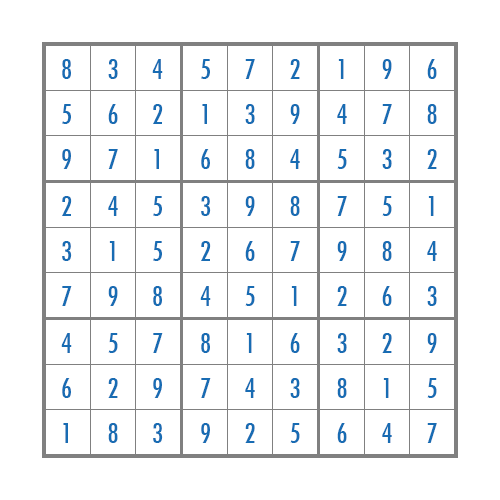
<style>
.page{position:relative;width:500px;height:500px;background:#ffffff}
.page>*{position:absolute;margin:0}
.t1{font:27px "Futura-CondensedMedium";color:#186cb3}
</style>
<div class="page">
<p class="t1" style="left:62px;top:59px;width:9px;height:20px">8</p>
<p class="t1" style="left:108px;top:59px;width:10px;height:20px">3</p>
<p class="t1" style="left:152px;top:59px;width:11px;height:20px">4</p>
<p class="t1" style="left:201px;top:59px;width:9px;height:20px">5</p>
<p class="t1" style="left:245px;top:59px;width:10px;height:20px">7</p>
<p class="t1" style="left:290px;top:59px;width:10px;height:20px">2</p>
<p class="t1" style="left:338px;top:59px;width:6px;height:20px">1</p>
<p class="t1" style="left:382px;top:59px;width:10px;height:20px">9</p>
<p class="t1" style="left:427px;top:59px;width:10px;height:20px">6</p>
<p class="t1" style="left:62px;top:104px;width:9px;height:20px">5</p>
<p class="t1" style="left:108px;top:104px;width:10px;height:20px">6</p>
<p class="t1" style="left:153px;top:104px;width:10px;height:20px">2</p>
<p class="t1" style="left:202px;top:104px;width:5px;height:20px">1</p>
<p class="t1" style="left:245px;top:104px;width:10px;height:20px">3</p>
<p class="t1" style="left:290px;top:104px;width:10px;height:20px">9</p>
<p class="t1" style="left:337px;top:104px;width:10px;height:20px">4</p>
<p class="t1" style="left:382px;top:104px;width:10px;height:20px">7</p>
<p class="t1" style="left:427px;top:104px;width:10px;height:20px">8</p>
<p class="t1" style="left:62px;top:149px;width:9px;height:20px">9</p>
<p class="t1" style="left:108px;top:149px;width:10px;height:20px">7</p>
<p class="t1" style="left:154px;top:149px;width:5px;height:20px">1</p>
<p class="t1" style="left:201px;top:149px;width:9px;height:20px">6</p>
<p class="t1" style="left:245px;top:149px;width:10px;height:20px">8</p>
<p class="t1" style="left:290px;top:149px;width:10px;height:20px">4</p>
<p class="t1" style="left:337px;top:149px;width:10px;height:20px">5</p>
<p class="t1" style="left:382px;top:149px;width:10px;height:20px">3</p>
<p class="t1" style="left:427px;top:149px;width:10px;height:20px">2</p>
<p class="t1" style="left:62px;top:196px;width:10px;height:20px">2</p>
<p class="t1" style="left:108px;top:196px;width:10px;height:20px">4</p>
<p class="t1" style="left:153px;top:196px;width:9px;height:20px">5</p>
<p class="t1" style="left:201px;top:196px;width:10px;height:20px">3</p>
<p class="t1" style="left:245px;top:196px;width:10px;height:20px">9</p>
<p class="t1" style="left:290px;top:196px;width:10px;height:20px">8</p>
<p class="t1" style="left:337px;top:196px;width:10px;height:20px">7</p>
<p class="t1" style="left:382px;top:196px;width:10px;height:20px">5</p>
<p class="t1" style="left:428px;top:196px;width:6px;height:20px">1</p>
<p class="t1" style="left:62px;top:241px;width:10px;height:20px">3</p>
<p class="t1" style="left:109px;top:241px;width:6px;height:20px">1</p>
<p class="t1" style="left:153px;top:241px;width:9px;height:20px">5</p>
<p class="t1" style="left:201px;top:241px;width:10px;height:20px">2</p>
<p class="t1" style="left:245px;top:241px;width:10px;height:20px">6</p>
<p class="t1" style="left:290px;top:241px;width:10px;height:20px">7</p>
<p class="t1" style="left:337px;top:241px;width:10px;height:20px">9</p>
<p class="t1" style="left:382px;top:241px;width:10px;height:20px">8</p>
<p class="t1" style="left:427px;top:241px;width:10px;height:20px">4</p>
<p class="t1" style="left:62px;top:286px;width:10px;height:20px">7</p>
<p class="t1" style="left:108px;top:286px;width:10px;height:20px">9</p>
<p class="t1" style="left:153px;top:286px;width:9px;height:20px">8</p>
<p class="t1" style="left:200px;top:286px;width:11px;height:20px">4</p>
<p class="t1" style="left:245px;top:286px;width:10px;height:20px">5</p>
<p class="t1" style="left:291px;top:286px;width:6px;height:20px">1</p>
<p class="t1" style="left:337px;top:286px;width:10px;height:20px">2</p>
<p class="t1" style="left:382px;top:286px;width:10px;height:20px">6</p>
<p class="t1" style="left:427px;top:286px;width:10px;height:20px">3</p>
<p class="t1" style="left:61px;top:333px;width:11px;height:20px">4</p>
<p class="t1" style="left:108px;top:333px;width:10px;height:20px">5</p>
<p class="t1" style="left:153px;top:333px;width:10px;height:20px">7</p>
<p class="t1" style="left:201px;top:333px;width:9px;height:20px">8</p>
<p class="t1" style="left:246px;top:333px;width:6px;height:20px">1</p>
<p class="t1" style="left:290px;top:333px;width:10px;height:20px">6</p>
<p class="t1" style="left:337px;top:333px;width:10px;height:20px">3</p>
<p class="t1" style="left:382px;top:333px;width:10px;height:20px">2</p>
<p class="t1" style="left:427px;top:333px;width:10px;height:20px">9</p>
<p class="t1" style="left:62px;top:378px;width:9px;height:20px">6</p>
<p class="t1" style="left:108px;top:378px;width:10px;height:20px">2</p>
<p class="t1" style="left:153px;top:378px;width:9px;height:20px">9</p>
<p class="t1" style="left:201px;top:378px;width:10px;height:20px">7</p>
<p class="t1" style="left:245px;top:378px;width:10px;height:20px">4</p>
<p class="t1" style="left:290px;top:378px;width:10px;height:20px">3</p>
<p class="t1" style="left:337px;top:378px;width:10px;height:20px">8</p>
<p class="t1" style="left:383px;top:378px;width:6px;height:20px">1</p>
<p class="t1" style="left:427px;top:378px;width:10px;height:20px">5</p>
<p class="t1" style="left:63px;top:423px;width:5px;height:20px">1</p>
<p class="t1" style="left:108px;top:423px;width:10px;height:20px">8</p>
<p class="t1" style="left:153px;top:423px;width:10px;height:20px">3</p>
<p class="t1" style="left:201px;top:423px;width:9px;height:20px">9</p>
<p class="t1" style="left:245px;top:423px;width:10px;height:20px">2</p>
<p class="t1" style="left:290px;top:423px;width:10px;height:20px">5</p>
<p class="t1" style="left:337px;top:423px;width:10px;height:20px">6</p>
<p class="t1" style="left:382px;top:423px;width:10px;height:20px">4</p>
<p class="t1" style="left:427px;top:423px;width:10px;height:20px">7</p>
</div>
